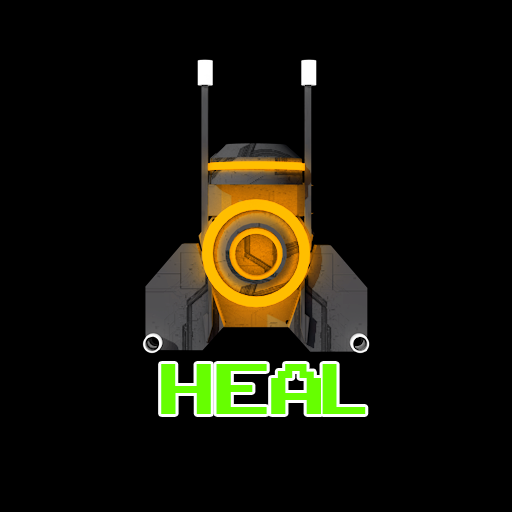
<style>
.page{position:relative;width:512px;height:512px;background:#000000}
.page>*{position:absolute;margin:0}
.t1{font:100px "ArcadeClassic";color:#66ff00}
</style>
<div class="page">
<p class="t1" style="left:161px;top:364px;width:205px;height:50px">Heal</p>
</div>
